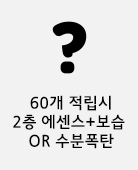
<style>
.page{position:relative;width:138px;height:170px;background:#f2f2f2}
.page>*{position:absolute;margin:0}
.t1{font:16px "JejuGothic";color:#000000;text-transform:uppercase}
</style>
<div class="page">
<p class="t1" style="left:13px;top:95px;width:112px;height:54px;text-align:center">60개 적립시<br>2층 에센스+보습 <br>or 수분폭탄</p>
</div>
